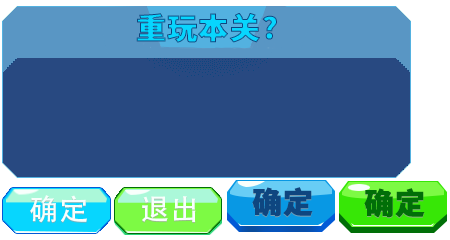
<style>
.page{position:relative;width:450px;height:240px;background:#284981}
.page>*{position:absolute;margin:0}
.t1{font:30px "SourceHanSansCN-Heavy";letter-spacing:0.02em;font-weight:bold}
.t2{font:29.1px "SourceHanSansCN-Heavy";letter-spacing:0.02em;color:#f8fffc;font-weight:bold}
.t3{font:29px "SourceHanSansCN-Heavy";letter-spacing:0.02em;color:#f8fffc;font-weight:bold}
.t4{font:29.5px "SourceHanSansCN-Heavy";letter-spacing:0.02em;color:#0e4680;font-weight:bold}
.t5{font:29.5px "SourceHanSansCN-Heavy";letter-spacing:0.02em;color:#016f08;font-weight:bold}
</style>
<div class="page">
<p class="t1" style="left:136px;top:13px;width:141px;height:30px">重玩本关?</p>
<p class="t2" style="left:30px;top:195px;width:57px;height:28px">确定</p>
<p class="t3" style="left:142px;top:196px;width:54px;height:27px">退出</p>
<p class="t4" style="left:252px;top:187px;width:61px;height:30px">确定</p>
<p class="t5" style="left:364px;top:188px;width:61px;height:30px">确定</p>
</div>
